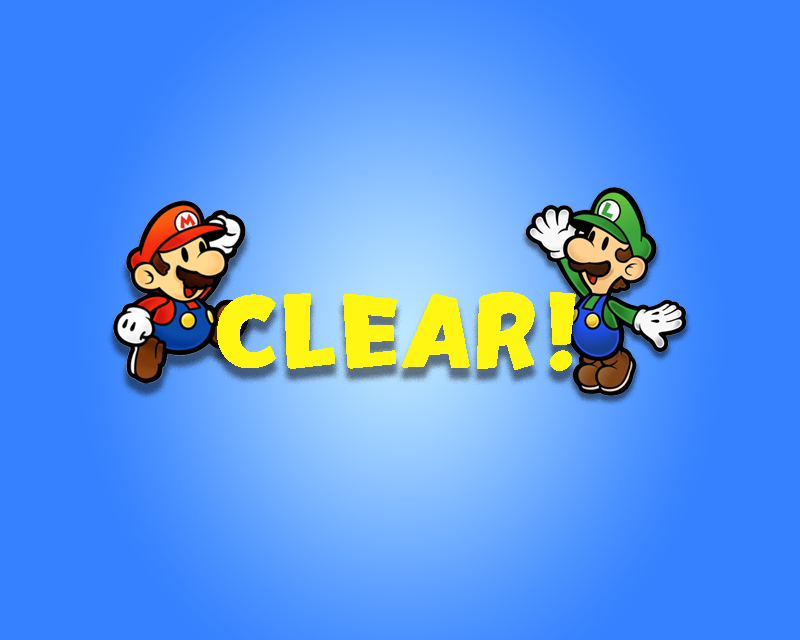
<style>
.page{position:relative;width:800px;height:640px;background:#3581ff}
.page>*{position:absolute;margin:0}
.t1{font:91.4px "KoreanPKS-R";letter-spacing:0.05em;color:#fff713}
</style>
<div class="page">
<p class="t1" style="left:217px;top:292px;width:359px;height:79px">CLEAR!</p>
</div>
